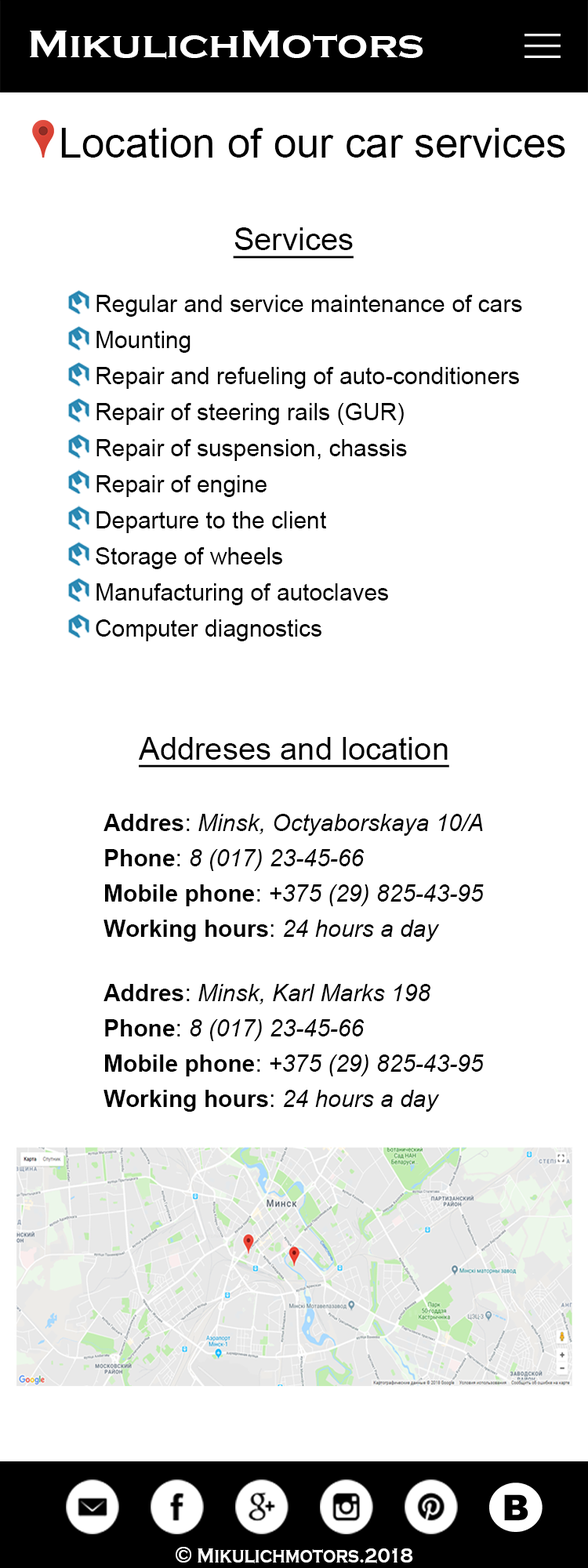
<style>
.page{position:relative;width:588px;height:1568px;background:#ffffff}
.page>*{position:absolute;margin:0}
.t1{font:39.2px "CopperplateGothic-Bold";color:#ffffff;scale:1.11 1}
.t2{font:41.6px "ArialMT";color:#000000}
.t3{font:31.4px "ArialMT";color:#000000;text-decoration:underline}
.t4{font:23.5px/36.1px "ArialMT";color:#000000}
.t5{font:3.1px/26.7px "Arial-BoldMT";color:#000000}
.t6{font:23.5px/35.3px "Arial-ItalicMT";color:#000000}
.t7{font:23.5px/35.3px "Arial-BoldMT";color:#000000}
.t8{font:23.5px/35.3px "ArialMT";color:#000000}
.t9{font:21.6px "CopperplateGothic-Bold";color:#ffffff;scale:0.83 1}
.t10{font:23.5px "CopperplateGothic-Bold";color:#ffffff;scale:0.83 1}
</style>
<div class="page">
<p class="t1" style="left:30px;top:31px;width:393px;height:28px">MikulichMotors</p>
<p class="t2" style="left:61px;top:128px;width:504px;height:30px">Location of our car services</p>
<p class="t3" style="left:233px;top:227px;width:121px;height:32px">Services</p>
<p class="t4" style="left:96px;top:295px;width:426px;height:346px"><span class="t5"><br></span>Regular and service maintenance of cars<br>Mounting<br>Repair and refueling of auto-conditioners<br>Repair of steering rails (GUR)<br>Repair of suspension, chassis<br>Repair of engine<br>Departure to the client<br>Storage of wheels<br>Manufacturing of autoclaves<br>Computer diagnostics</p>
<p class="t3" style="left:139px;top:737px;width:310px;height:31px">Addreses and location</p>
<p class="t6" style="left:103px;top:814px;width:381px;height:128px"><span class="t7">Addres</span><span class="t8">: </span>Minsk, Octyaborskaya 10/A<br><span class="t7">Phone</span><span class="t8">: </span>8 (017) 23-45-66<br><span class="t7">Mobile phone</span><span class="t8">: </span>+375 (29) 825-43-95<br><span class="t7">Working hours</span><span class="t8">: </span>24 hours a day</p>
<p class="t6" style="left:103px;top:984px;width:381px;height:128px"><span class="t7">Addres</span><span class="t8">: </span>Minsk, Karl Marks 198<br><span class="t7">Phone</span><span class="t8">: </span>8 (017) 23-45-66<br><span class="t7">Mobile phone</span><span class="t8">: </span>+375 (29) 825-43-95<br><span class="t7">Working hours</span><span class="t8">: </span>24 hours a day</p>
<p class="t9" style="left:176px;top:1547px;width:237px;height:16px"><span class="t10">©</span> Mikulichmotors.2018</p>
</div>
